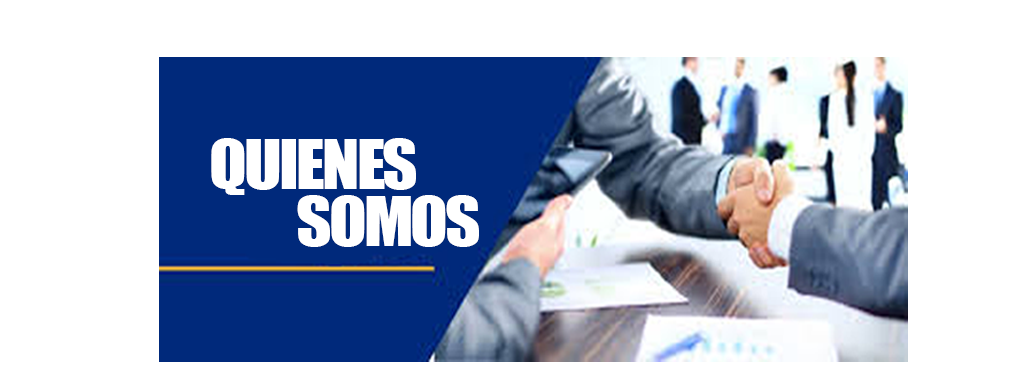
<style>
.page{position:relative;width:1012px;height:374px;background:#ffffff}
.page>*{position:absolute;margin:0}
.t1{font:62.8px "Impact";letter-spacing:-0.04em;color:#ffffff;scale:1.1 1}
</style>
<div class="page">
<p class="t1" style="left:211px;top:138px;width:205px;height:57px">QUIENES</p>
<p class="t1" style="left:297px;top:195px;width:182px;height:52px">SOMOS</p>
</div>
